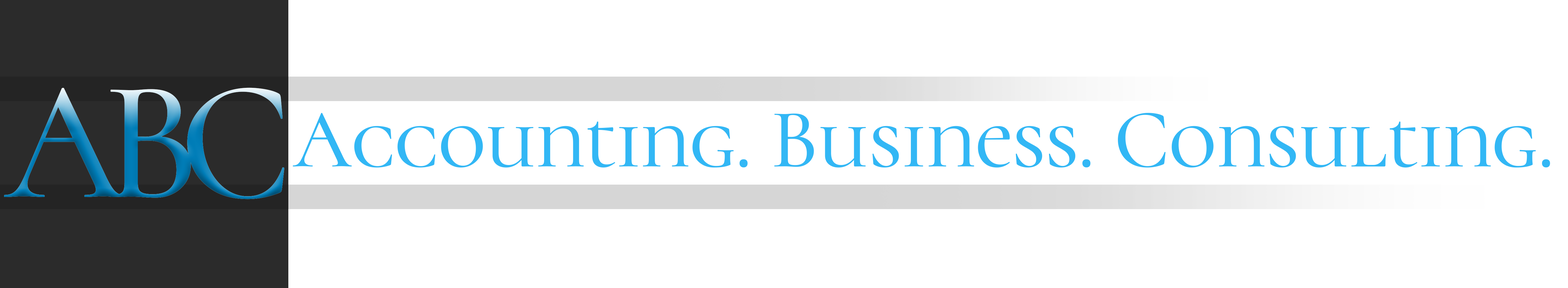
<style>
.page{position:relative;width:1568px;height:288px;background:#ffffff}
.page>*{position:absolute;margin:0}
.t1{font:171.9px "CormorantUnicase-Medium";letter-spacing:-0.12em}
.t2{font:84.3px "CormorantUnicase-Medium";color:#32b7f5}
</style>
<div class="page">
<p class="t1" style="left:4px;top:88px;width:280px;height:112px">ABC</p>
<p class="t2" style="left:293px;top:113px;width:1257px;height:55px">Accounting. Business. Consulting.</p>
</div>
